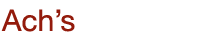
<style>
.page{position:relative;width:200px;height:40px;background:#ffffff}
.page>*{position:absolute;margin:0}
.t1{font:30px "HelveticaNeue";color:#931b0c}
</style>
<div class="page">
<p class="t1" style="left:1px;top:9px;width:74px;height:23px">Ach’s</p>
</div>
